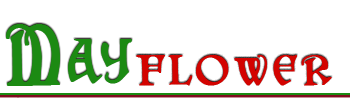
<style>
.page{position:relative;width:350px;height:110px;background:#ffffff}
.page>*{position:absolute;margin:0}
.t1{font:62.5px "Darkenstone";color:#1c8a13;font-variant:small-caps;font-weight:bold;scale:0.8 1}
.t2{font:30px "Darkenstone";letter-spacing:0.08em;color:#d30300;font-weight:bold}
</style>
<div class="page">
<p class="t1" style="left:6px;top:24px;width:126px;height:62px">May</p>
<p class="t2" style="left:136px;top:55px;width:196px;height:31px">Flower</p>
</div>
